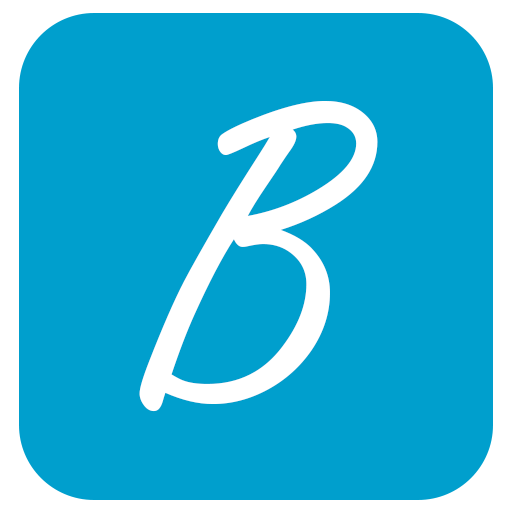
<style>
.page{position:relative;width:512px;height:512px;background:#009fcd}
.page>*{position:absolute;margin:0}
.t1{font:450px "FreestyleScript-Regular";color:#ffffff}
</style>
<div class="page">
<p class="t1" style="left:139px;top:101px;width:239px;height:311px">B</p>
</div>
